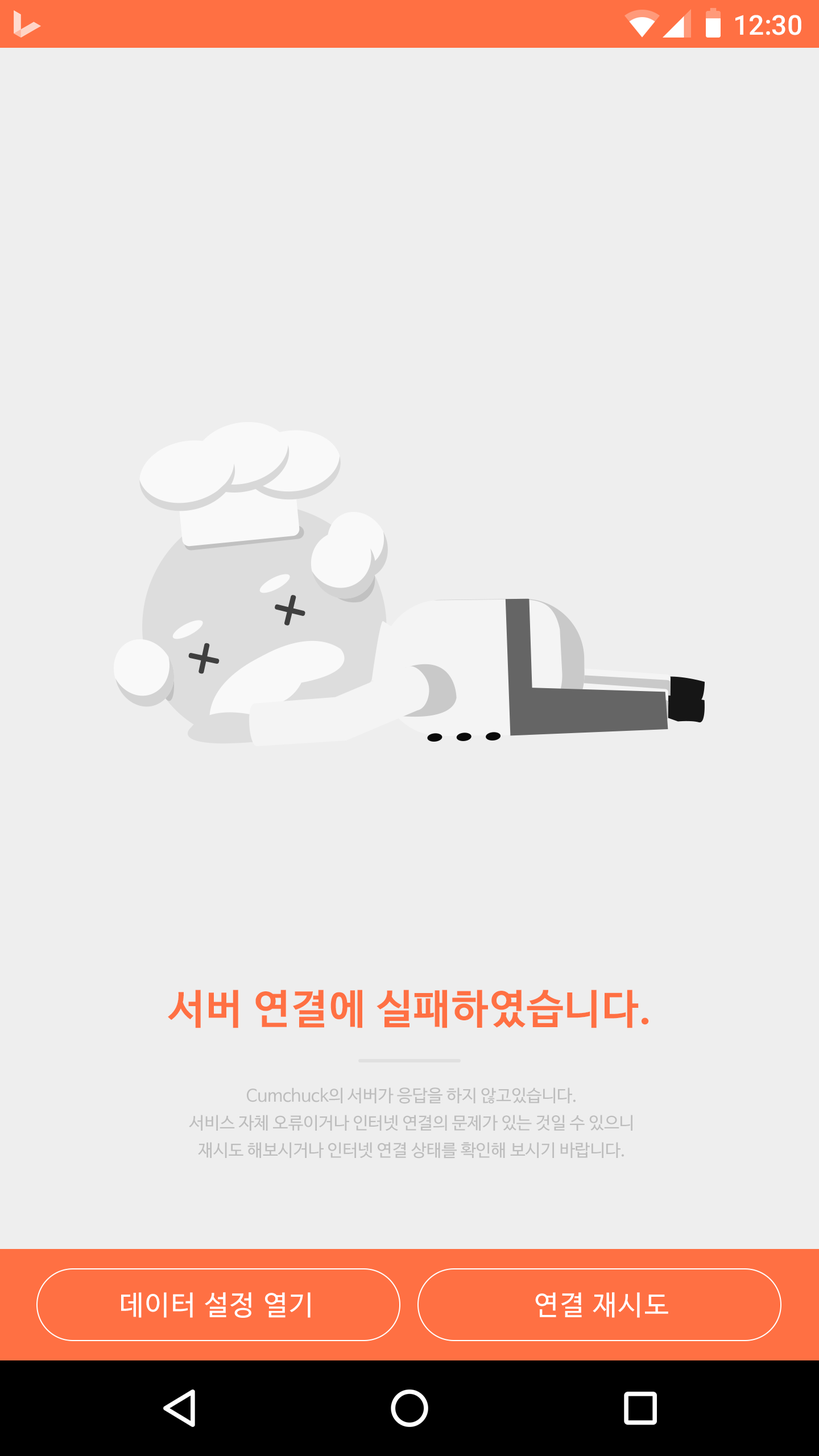
<style>
.page{position:relative;width:819px;height:1456px;background:#eeeeee}
.page>*{position:absolute;margin:0}
.t1{font:27.3px "Roboto-Medium";color:#ffffff}
.t2{font:40.9px "NanumBarunGothicBold";letter-spacing:0.025em;color:#ff7043}
.t3{font:17.1px/27.3px "NanumBarunGothic";color:#bdbdbd}
.t4{font:27.3px "NanumBarunGothic";letter-spacing:0.05em;color:#ffffff}
</style>
<div class="page">
<p class="t1" style="left:735px;top:15px;width:66px;height:20px">12:30</p>
<p class="t2" style="left:168px;top:990px;width:481px;height:38px">서버 연결에 실패하였습니다.</p>
<p class="t3" style="left:189px;top:1087px;width:443px;height:72px;text-align:center">Cumchuck의 서버가 응답을 하지 않고있습니다.<br>서비스 자체 오류이거나 인터넷 연결의 문제가 있는 것일 수 있으니<br>재시도 해보시거나 인터넷 연결 상태를 확인해 보시기 바랍니다.</p>
<p class="t4" style="left:121px;top:1292px;width:190px;height:26px">데이터 설정 열기</p>
<p class="t4" style="left:535px;top:1292px;width:133px;height:26px">연결 재시도</p>
</div>
